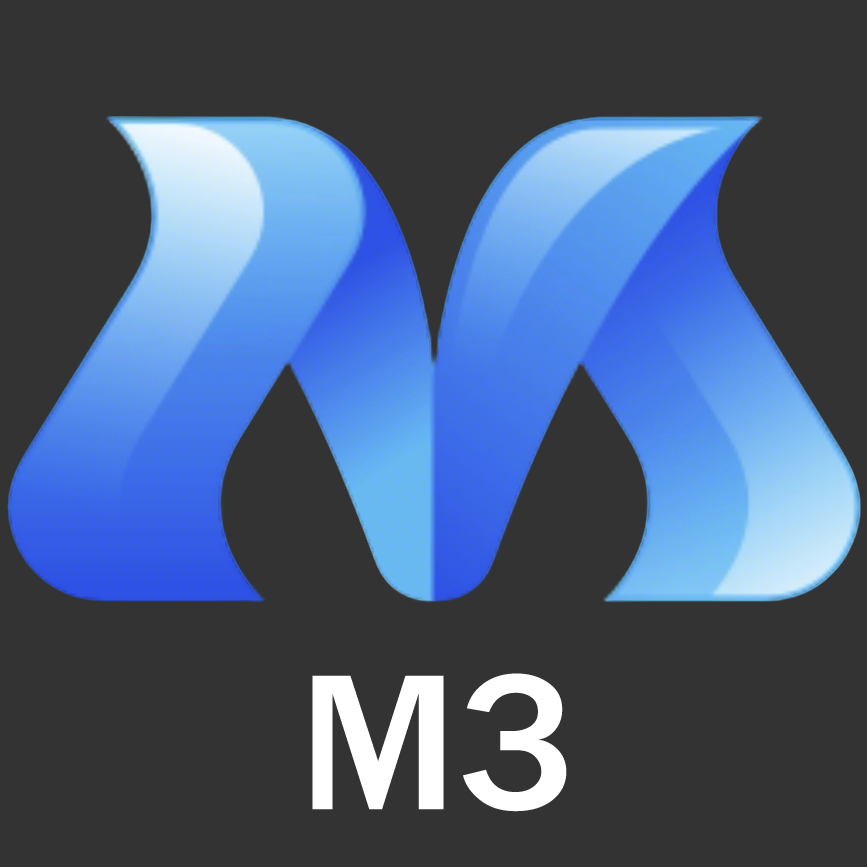
<style>
.page{position:relative;width:867px;height:867px;background:#333333}
.page>*{position:absolute;margin:0}
.t1{font:200px "FranklinGothic-Medium";color:#ffffff}
</style>
<div class="page">
<p class="t1" style="left:312px;top:673px;width:255px;height:139px">M3</p>
</div>
